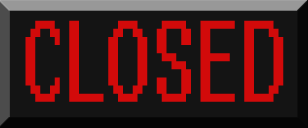
<style>
.page{position:relative;width:308px;height:128px;background:#141414}
.page>*{position:absolute;margin:0}
.t1{font:103.7px "System";color:#d20a0a;scale:0.6 1}
</style>
<div class="page">
<p class="t1" style="left:25px;top:20px;width:259px;height:82px">CLOSED</p>
</div>
